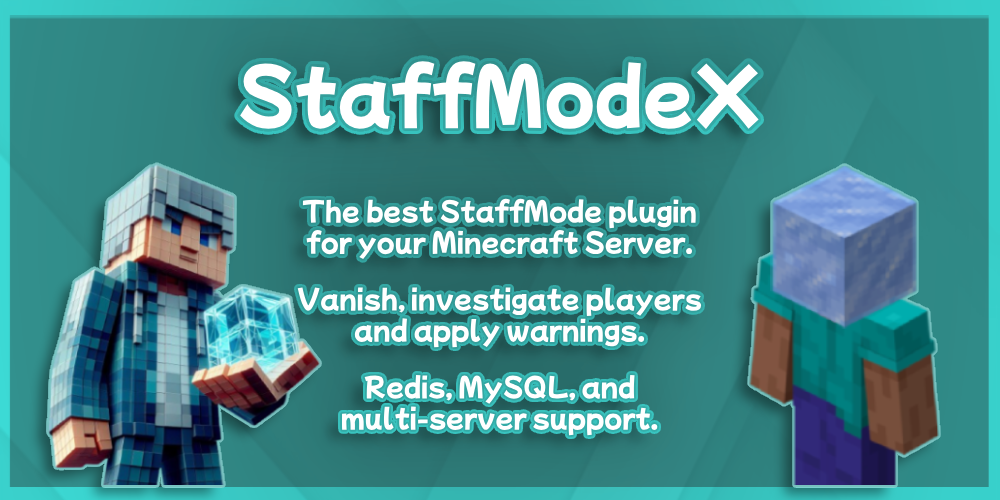
<style>
.page{position:relative;width:1000px;height:500px}
.page>*{position:absolute;margin:0}
.t1{font:73px "MochiyPopOne-Regular";color:#ffffff}
.t2{font:26px "MochiyPopOne-Regular";color:#ffffff}
</style>
<div class="page">
<p class="t1" style="left:240px;top:61px;width:519px;height:69px">StaffModeX</p>
<p class="t2" style="left:297px;top:198px;width:405px;height:238px;text-align:center">The best StaffMode plugin for your Minecraft Server.<br>Vanish, investigate players and apply warnings.<br>Redis, MySQL, and multi-server support.</p>
</div>
